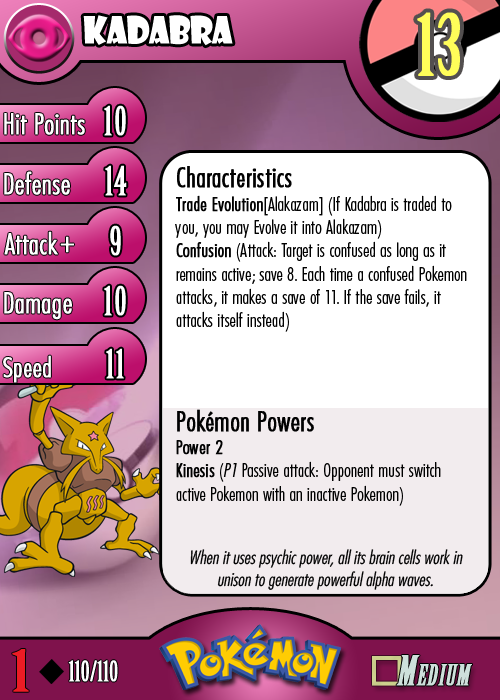
<style>
.page{position:relative;width:500px;height:700px;background:#ffffff}
.page>*{position:absolute;margin:0}
.t1{font:36.7px "ShowcardGothic-Reg";letter-spacing:-0.025em;color:#ffffff;scale:0.91 1}
.t2{font:83.3px "BirchStd";letter-spacing:0.025em;color:#fffd59;font-weight:bold}
.t3{font:27.8px "Futura-CondensedLight";color:#ffffff;font-weight:bold}
.t4{font:38.9px "BirchStd";letter-spacing:0.035em;color:#ffffff;font-weight:bold}
.t5{font:19.4px "FuturaCondensedBQ-Light";color:#010101}
.t6{font:27.8px "FuturaCondensedBQ-Light";color:#010101;font-weight:bold}
.t7{font:19.4px "FuturaCondensedBQ-Light";color:#010101;font-weight:bold}
.t8{font:19.4px "FuturaCondensedBQ-Light";color:#010101;font-style:italic}
.t9{font:30.6px "Futura-CondensedLight";color:#ffffff;font-weight:bold}
.t10{font:27.8px "FuturaCondensedBQ-Light";color:#ffffff;font-weight:bold}
.t11{font:18.1px "Futura-CondensedLight";color:#010101;font-style:italic}
.t12{font:55.6px "BirchStd";color:#ed1c24;font-weight:bold;scale:1.5 1}
.t13{font:27.8px "BirchStd";color:#ffffff;font-weight:bold}
</style>
<div class="page">
<p class="t1" style="left:83px;top:15px;width:150px;height:31px">kadabra</p>
<p class="t2" style="left:417px;top:12px;width:43px;height:64px">13</p>
<p class="t3" style="left:4px;top:113px;width:81px;height:22px">Hit Points</p>
<p class="t4" style="left:104px;top:105px;width:22px;height:31px">10</p>
<p class="t3" style="left:4px;top:171px;width:66px;height:24px">Defense</p>
<p class="t4" style="left:105px;top:165px;width:22px;height:31px">14</p>
<p class="t5" style="left:175px;top:166px;width:292px;height:340px"><span class="t6">Characteristics<br></span><span class="t7">Trade Evolution</span>[Alakazam] (If Kadabra is traded to you, you may Evolve it into Alakazam)<br><span class="t7">Confusion</span> (Attack: Target is confused as long as it remains active; save 8. Each time a confused Pokemon attacks, it makes a save of 11. If the save fails, it attacks itself instead)<br><br><br><br><span class="t6">Pokémon Powers<br></span><span class="t7">Power 2<br>Kinesis</span> (<span class="t8">P1</span> Passive attack: Opponent must switch active Pokemon with an inactive Pokemon)</p>
<p class="t3" style="left:4px;top:231px;width:54px;height:24px">Attack</p>
<p class="t4" style="left:110px;top:225px;width:11px;height:31px">9</p>
<p class="t9" style="left:60px;top:236px;width:14px;height:17px">+</p>
<p class="t3" style="left:4px;top:292px;width:68px;height:28px">Damage</p>
<p class="t4" style="left:104px;top:285px;width:22px;height:31px">10</p>
<p class="t4" style="left:106px;top:348px;width:18px;height:31px">11</p>
<p class="t10" style="left:3px;top:355px;width:48px;height:28px">Speed</p>
<p class="t11" style="left:190px;top:549px;width:273px;height:41px;text-align:center">When it uses psychic power, all its brain cells work in unison to generate powerful alpha waves.</p>
<p class="t12" style="left:12px;top:649px;width:17px;height:43px">1</p>
<p class="t13" style="left:68px;top:660px;width:50px;height:22px">110/110</p>
</div>
